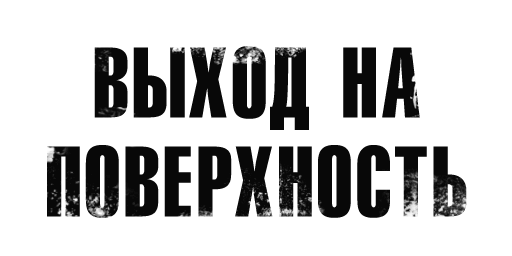
<style>
.page{position:relative;width:512px;height:256px;background:#ffffff}
.page>*{position:absolute;margin:0}
.t1{font:97px/99px "GymnasiaC";color:#000000}
</style>
<div class="page">
<p class="t1" style="left:47px;top:46px;width:420px;height:172px;text-align:center;opacity:0.97">ВЫХОД НА<br>ПОВЕРХНОСТЬ</p>
</div>
